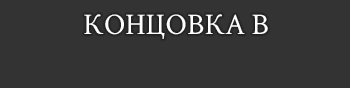
<style>
.page{position:relative;width:350px;height:88px;background:#333333}
.page>*{position:absolute;margin:0}
.t1{font:30px "CrimsonText-Regular";color:#ffffff}
</style>
<div class="page">
<p class="t1" style="left:84px;top:14px;width:184px;height:25px">КОНЦОВКА B</p>
</div>
